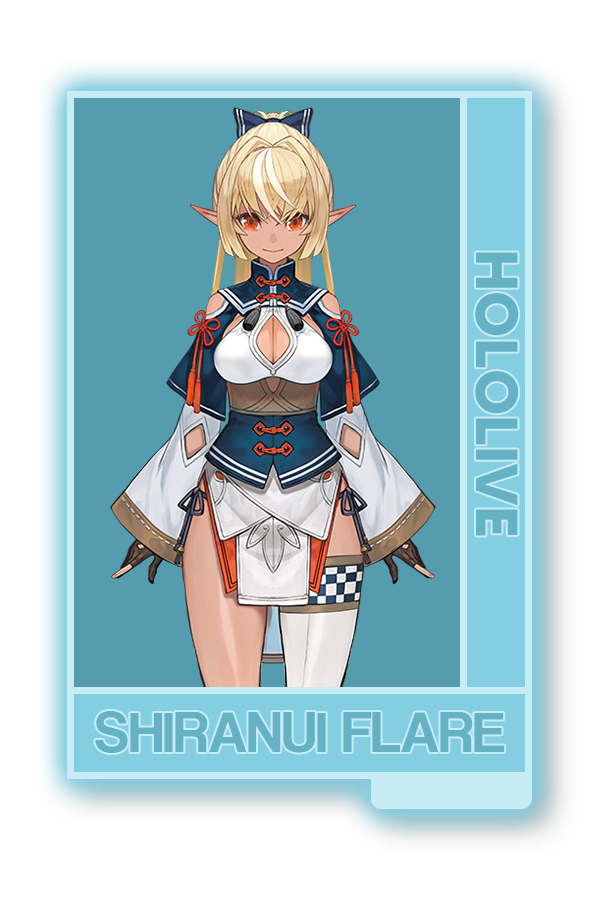
<style>
.page{position:relative;width:600px;height:900px;background:#549cae}
.page>*{position:absolute;margin:0}
.t1{font:59.2px "MADETOMMY-Bold";color:#66b2c5}
.t2{font:59.1px "CoolveticaRg-Regular";color:#66b2c5}
</style>
<div class="page">
<p class="t1" style="left:475px;top:252px;width:44px;height:284px;rotate:90deg">HOLOLIVE</p>
<p class="t2" style="left:95px;top:711px;width:410px;height:42px">SHIRANUI FLARE</p>
</div>
